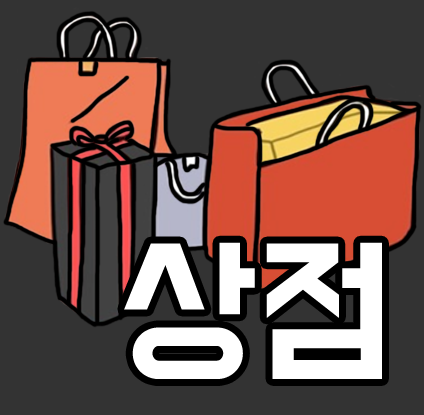
<style>
.page{position:relative;width:424px;height:415px;background:#333333}
.page>*{position:absolute;margin:0}
.t1{font:144px "BMDoHyeon";color:#ffffff}
</style>
<div class="page">
<p class="t1" style="left:124px;top:242px;width:258px;height:137px">상점</p>
</div>
